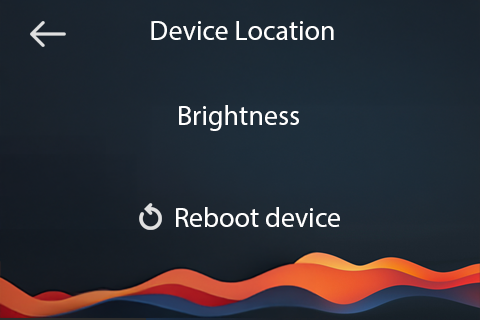
<style>
.page{position:relative;width:480px;height:320px}
.page>*{position:absolute;margin:0}
.t1{font:28px "MyriadPro-Regular";color:#ffffff}
</style>
<div class="page">
<p class="t1" style="left:151px;top:21px;width:183px;height:19px">Device Location</p>
<p class="t1" style="left:179px;top:105px;width:120px;height:26px">Brightness</p>
<p class="t1" style="left:176px;top:207px;width:164px;height:20px">Reboot device</p>
</div>
